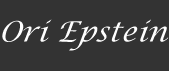
<style>
.page{position:relative;width:169px;height:71px;background:#333333}
.page>*{position:absolute;margin:0}
.t1{font:28px "LucidaCalligraphy-Italic";color:#fefefe;font-style:italic}
</style>
<div class="page">
<p class="t1" style="left:2px;top:19px;width:167px;height:32px">Ori Epstein</p>
</div>
